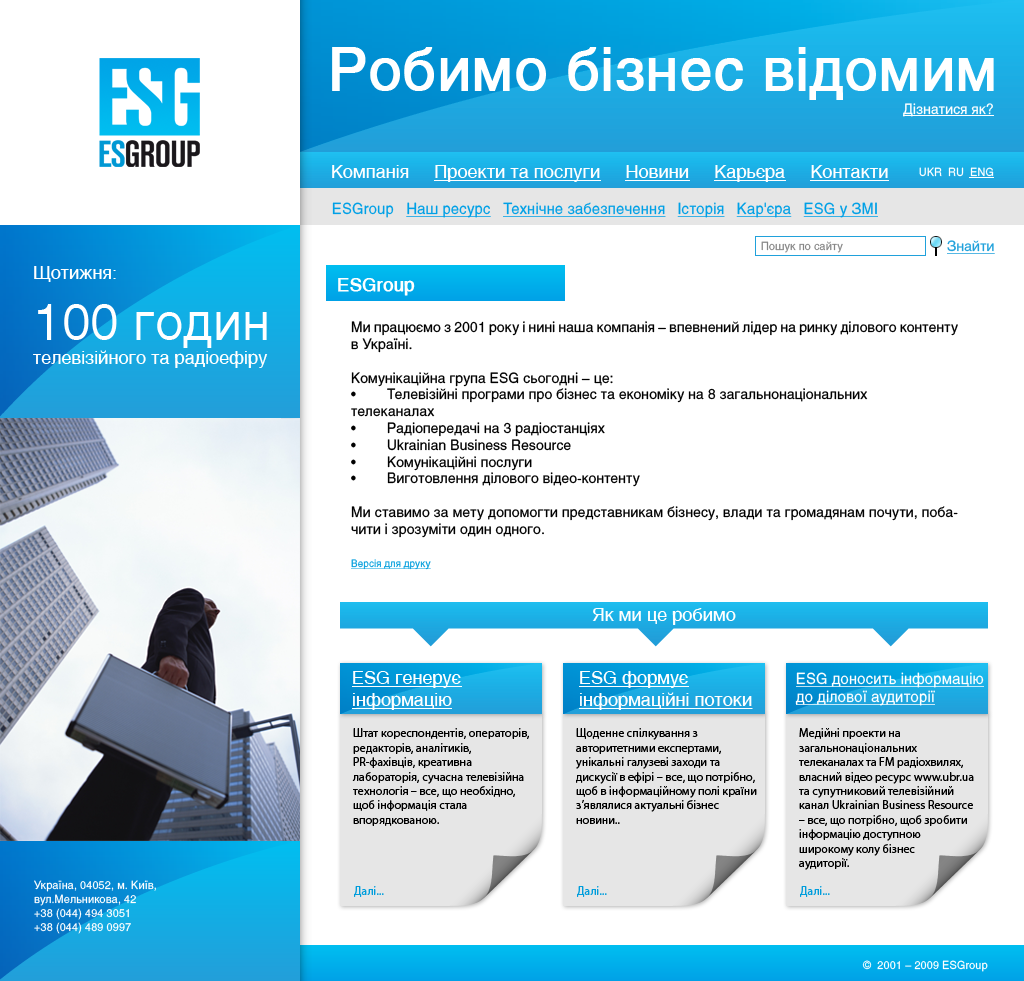
<style>
.page{position:relative;width:1024px;height:981px;background:#ffffff}
.page>*{position:absolute;margin:0}
.t1{font:58px "Helios";color:#ffffff;font-weight:bold}
.t2{font:14px "Helios";color:#ffffff}
.t3{font:18px "Helios";color:#ffffff}
.t4{font:11px "Helios";color:#ffffff}
.t5{font:15px "Helios";color:#00a0e6;text-decoration:underline}
.t6{font:15px "Helios";color:#00a0e6}
.t7{font:11px "Helios";color:#858585}
.t8{font:14px "Helios";color:#20a1db;text-decoration:underline}
.t9{font:18px/24px "Helios";color:#ffffff}
.t10{font:51px "Helios";color:#ffffff}
.t11{font:18px "Helios";color:#ffffff;font-weight:bold}
.t12{font:14px "Helios";color:#000000}
.t13{font:10px "Helios";color:#009ddc;text-decoration:underline}
.t14{font:18px "Helios";color:#ffffff;text-decoration:underline}
.t15{font:15px "Helios";color:#ffffff;text-decoration:underline}
.t16{font:12px "MyriadPro-Regular";color:#000000}
.t17{font:11px/14px "Helios";color:#ffffff}
.t18{font:12px "MyriadPro-Regular";color:#009ddc}
</style>
<div class="page">
<p class="t1" style="left:332px;top:47px;width:662px;height:53px">Робимо бізнес відомим</p>
<p class="t2" style="left:903px;top:103px;width:90px;height:14px">Дізнатися як?</p>
<p class="t3" style="left:332px;top:165px;width:556px;height:17px">Компанія     Проекти та послуги     Новини     Карьєра     Контакти</p>
<p class="t4" style="left:919px;top:167px;width:75px;height:10px">UKR  RU  ENG</p>
<p class="t5" style="left:332px;top:202px;width:546px;height:16px"><span class="t6">ESGroup   </span>Наш ресурс   Технічне забезпечення   Історія   Кар'єра   ESG у ЗМІ</p>
<p class="t7" style="left:761px;top:241px;width:82px;height:12px">Пошук по сайту</p>
<p class="t8" style="left:947px;top:240px;width:48px;height:14px">Знайти</p>
<p class="t9" style="left:33px;top:266px;width:235px;height:102px"><span class="t3">Щотижня:<br></span><span class="t10">100 годин </span>телевізійного та радіоефіру</p>
<p class="t11" style="left:338px;top:278px;width:77px;height:18px">ESGroup</p>
<p class="t12" style="left:351px;top:321px;width:607px;height:217px;text-align:justify">Ми працюємо з 2001 року і нині наша компанія – впевнений лідер на ринку ділового контенту в Україні. <br><br>Комунікаційна група ESG сьогодні – це:<br>• Телевізійні програми про бізнес та економіку на 8 загальнонаціональних   телеканалах<br>• Радіопередачі на 3 радіостанціях<br>• Ukrainian Business Resource<br>• Комунікаційні послуги<br>• Виготовлення ділового відео-контенту <br><br>Ми ставимо за мету допомогти представникам бізнесу, влади та громадянам почути, побачити і зрозуміти один одного.</p>
<p class="t13" style="left:351px;top:559px;width:80px;height:11px">Версія для друку</p>
<p class="t3" style="left:592px;top:608px;width:144px;height:17px">Як ми це робимо</p>
<p class="t3" style="left:352px;top:671px;width:109px;height:39px">ESG генерує<br><span class="t14">інформацію</span></p>
<p class="t14" style="left:579px;top:671px;width:174px;height:39px"><span class="t3">ESG формує<br></span>інформаційні потоки</p>
<p class="t15" style="left:795px;top:672px;width:189px;height:34px">ESG доносить інформацію<br>до ділової аудиторії</p>
<p class="t16" style="left:352px;top:728px;width:177px;height:98px">Штат кореспондентів, операторів, редакторів, аналітиків, PR-фахівців, креативна лабораторія, сучасна телевізійна технологія – все, що необхідно, щоб інформація стала впорядкованою.</p>
<p class="t16" style="left:576px;top:728px;width:181px;height:96px">Щоденне спілкування з авторитетними експертами, унікальні галузеві заходи та дискусії в ефірі – все, що потрібно, щоб в інформаційному полі країни з’являлися актуальні бізнес новини..</p>
<p class="t16" style="left:799px;top:728px;width:175px;height:142px">Медійні проекти на загальнонаціональних телеканалах та FM радіохвилях, власний відео ресурс www.ubr.ua та супутниковий телевізійний канал Ukrainian Business Resource – все, що потрібно, щоб зробити інформацію доступною <br>широкому колу бізнес <br>аудиторії.</p>
<p class="t17" style="left:34px;top:880px;width:122px;height:54px">Україна, 04052, м. Київ, <br>вул.Мельникова, 42<br>+38 (044) 494 3051<br>+38 (044) 489 0997</p>
<p class="t18" style="left:354px;top:886px;width:30px;height:11px">Далі...</p>
<p class="t18" style="left:577px;top:886px;width:30px;height:11px">Далі...</p>
<p class="t18" style="left:800px;top:886px;width:30px;height:11px">Далі...</p>
<p class="t4" style="left:862px;top:960px;width:126px;height:12px">©  2001 – 2009 ESGroup</p>
</div>
